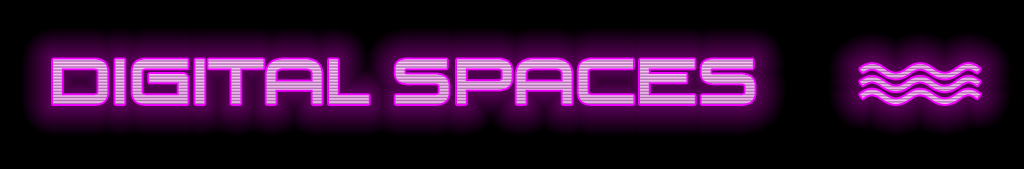
<style>
.page{position:relative;width:1024px;height:169px;background:#000000}
.page>*{position:absolute;margin:0}
.t1{font:60.1px "VenusRising-Regular"}
</style>
<div class="page">
<p class="t1" style="left:53px;top:59px;width:702px;height:45px">DIGITAL SPACES</p>
</div>
